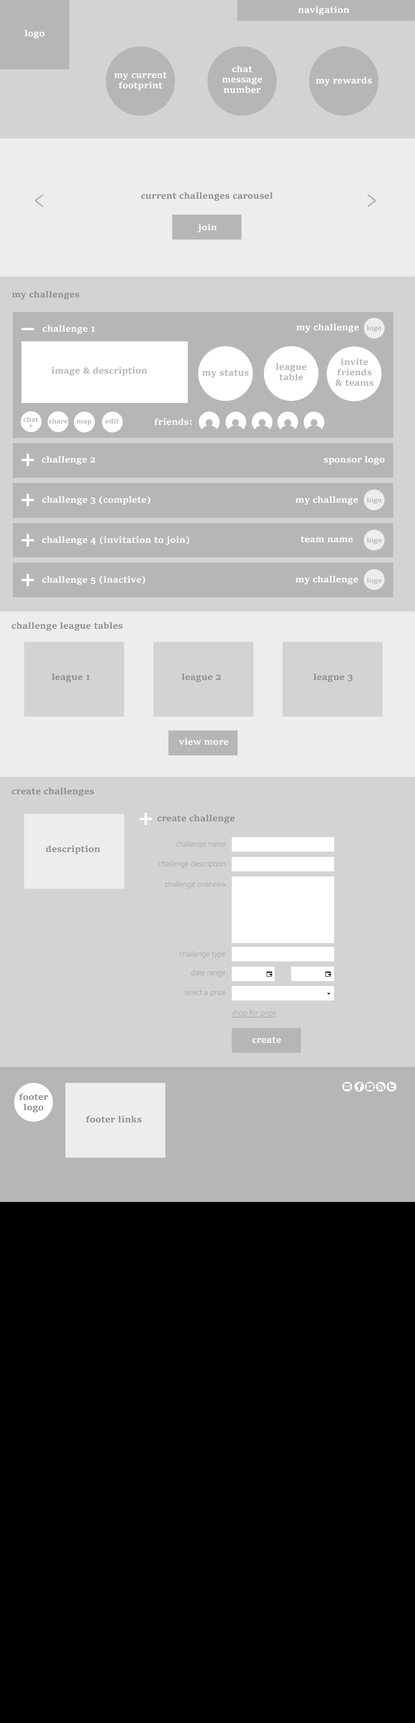
<style>
.page{position:relative;width:415px;height:1723px;background:#000000}
.page>*{position:absolute;margin:0}
.t1{font:9px "SitkaSmall-Bold";color:#ffffff}
.t2{font:9px/10.4px "SitkaSmall-Bold";color:#ffffff}
.t3{font:28.7px "ChaparralPro-Regular";letter-spacing:-0.04em;color:#b6b6b6}
.t4{font:9px "SitkaSmall-Bold";color:#908e8e}
.t5{font:6.6px "SitkaSmall-Bold";color:#b6b6b6}
.t6{font:9px/10.4px "SitkaSmall-Bold";color:#b6b6b6}
.t7{font:9px "SitkaSmall-Bold";color:#b6b6b6}
.t8{font:6.6px/6.2px "SitkaSmall-Bold";color:#b6b6b6}
.t9{font:22.5px "SitkaSmall-Bold";color:#ffffff}
.t10{font:7.6px "SegoeUI-Light";color:#908e8e}
.t11{font:7.6px "SegoeUI-Light";color:#908e8e;text-decoration:underline}
.t12{font:9px/10.4px "SitkaSmall-Bold";color:#908e8e}
</style>
<div class="page">
<p class="t1" style="left:298px;top:6px;width:52px;height:9px">navigation</p>
<p class="t1" style="left:25px;top:30px;width:20px;height:8px">logo</p>
<p class="t2" style="left:222px;top:65px;width:40px;height:28px;text-align:center">chat<br>message<br>number</p>
<p class="t2" style="left:114px;top:72px;width:53px;height:18px;text-align:center">my current<br>footprint</p>
<p class="t1" style="left:316px;top:77px;width:56px;height:9px">my rewards</p>
<p class="t3" style="left:35px;top:194px;width:9px;height:13px">&lt;</p>
<p class="t4" style="left:141px;top:192px;width:132px;height:9px">current challenges carousel</p>
<p class="t3" style="left:368px;top:194px;width:9px;height:13px">&gt;</p>
<p class="t1" style="left:198px;top:224px;width:19px;height:8px">join</p>
<p class="t4" style="left:12px;top:291px;width:68px;height:8px">my challenges</p>
<p class="t1" style="left:43px;top:325px;width:52px;height:9px">challenge 1</p>
<p class="t1" style="left:297px;top:324px;width:62px;height:8px">my challenge</p>
<p class="t5" style="left:367px;top:325px;width:15px;height:7px">logo</p>
<p class="t6" style="left:276px;top:363px;width:31px;height:17px;text-align:center">league<br>table</p>
<p class="t6" style="left:336px;top:358px;width:38px;height:28px;text-align:center">invite<br>friends<br>&amp; teams</p>
<p class="t7" style="left:52px;top:367px;width:95px;height:9px">image &amp; description</p>
<p class="t7" style="left:202px;top:370px;width:47px;height:8px">my status</p>
<p class="t8" style="left:24px;top:417px;width:14px;height:11px;text-align:center">chat<br>+</p>
<p class="t5" style="left:49px;top:418px;width:19px;height:6px">share</p>
<p class="t5" style="left:77px;top:420px;width:14px;height:5px">map</p>
<p class="t5" style="left:106px;top:418px;width:13px;height:6px">edit</p>
<p class="t1" style="left:154px;top:418px;width:38px;height:7px">friends:</p>
<p class="t9" style="left:21px;top:453px;width:13px;height:13px">+</p>
<p class="t1" style="left:42px;top:456px;width:53px;height:9px">challenge 2</p>
<p class="t1" style="left:324px;top:456px;width:61px;height:9px">sponsor logo</p>
<p class="t9" style="left:21px;top:494px;width:13px;height:12px">+</p>
<p class="t1" style="left:42px;top:496px;width:109px;height:9px">challenge 3 (complete)</p>
<p class="t1" style="left:296px;top:496px;width:63px;height:9px">my challenge</p>
<p class="t5" style="left:367px;top:497px;width:15px;height:7px">logo</p>
<p class="t9" style="left:21px;top:534px;width:13px;height:13px">+</p>
<p class="t1" style="left:42px;top:536px;width:148px;height:9px">challenge 4 (invitation to join)</p>
<p class="t1" style="left:301px;top:536px;width:52px;height:6px">team name</p>
<p class="t5" style="left:367px;top:538px;width:15px;height:6px">logo</p>
<p class="t9" style="left:21px;top:574px;width:13px;height:12px">+</p>
<p class="t1" style="left:42px;top:576px;width:103px;height:9px">challenge 5 (inactive)</p>
<p class="t1" style="left:296px;top:576px;width:63px;height:8px">my challenge</p>
<p class="t5" style="left:367px;top:578px;width:15px;height:6px">logo</p>
<p class="t4" style="left:12px;top:622px;width:111px;height:9px">challenge league tables</p>
<p class="t4" style="left:52px;top:673px;width:38px;height:9px">league 1</p>
<p class="t4" style="left:182px;top:673px;width:39px;height:9px">league 2</p>
<p class="t4" style="left:314px;top:673px;width:39px;height:9px">league 3</p>
<p class="t1" style="left:179px;top:738px;width:50px;height:7px">view more</p>
<p class="t4" style="left:12px;top:788px;width:82px;height:8px">create challenges</p>
<p class="t9" style="left:140px;top:812px;width:12px;height:13px">+</p>
<p class="t4" style="left:158px;top:814px;width:77px;height:9px">create challenge</p>
<p class="t4" style="left:46px;top:845px;width:54px;height:9px">description</p>
<p class="t10" style="left:176px;top:840px;width:50px;height:8px">challenge name</p>
<p class="t10" style="left:159px;top:860px;width:67px;height:8px">challenge description</p>
<p class="t10" style="left:165px;top:881px;width:61px;height:8px">challenge overview</p>
<p class="t10" style="left:180px;top:951px;width:46px;height:7px">challenge type</p>
<p class="t10" style="left:191px;top:969px;width:34px;height:8px">date range</p>
<p class="t10" style="left:185px;top:989px;width:41px;height:8px">select a prize</p>
<p class="t11" style="left:232px;top:1009px;width:45px;height:8px">shop for prize</p>
<p class="t1" style="left:252px;top:1037px;width:29px;height:6px">create</p>
<p class="t12" style="left:19px;top:1093px;width:29px;height:19px;text-align:center">footer<br>logo</p>
<p class="t4" style="left:86px;top:1116px;width:56px;height:7px">footer links</p>
</div>
